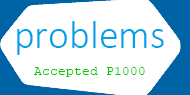
<style>
.page{position:relative;width:190px;height:95px;background:#ffffff}
.page>*{position:absolute;margin:0}
.t1{font:40px "Calibri-Light";color:#00a0e9}
.t2{font:13.3px "CourierNewPSMT";color:#05c900}
</style>
<div class="page">
<p class="t1" style="left:17px;top:21px;width:147px;height:34px">problems</p>
<p class="t2" style="left:34px;top:67px;width:111px;height:10px">Accepted P1000</p>
</div>
